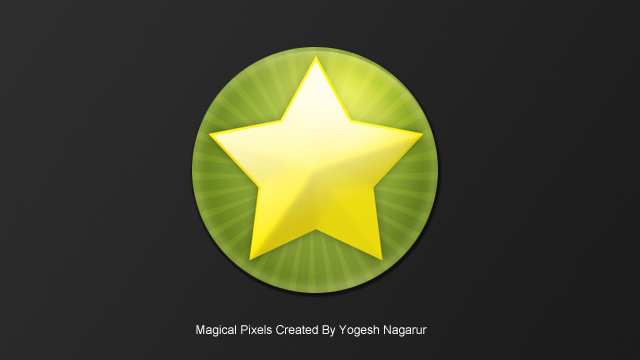
<style>
.page{position:relative;width:640px;height:360px}
.page>*{position:absolute;margin:0}
.t1{font:12px "ArialMT";color:#ffffff}
</style>
<div class="page">
<p class="t1" style="left:196px;top:325px;width:231px;height:12px">Magical Pixels Created By Yogesh Nagarur</p>
</div>
